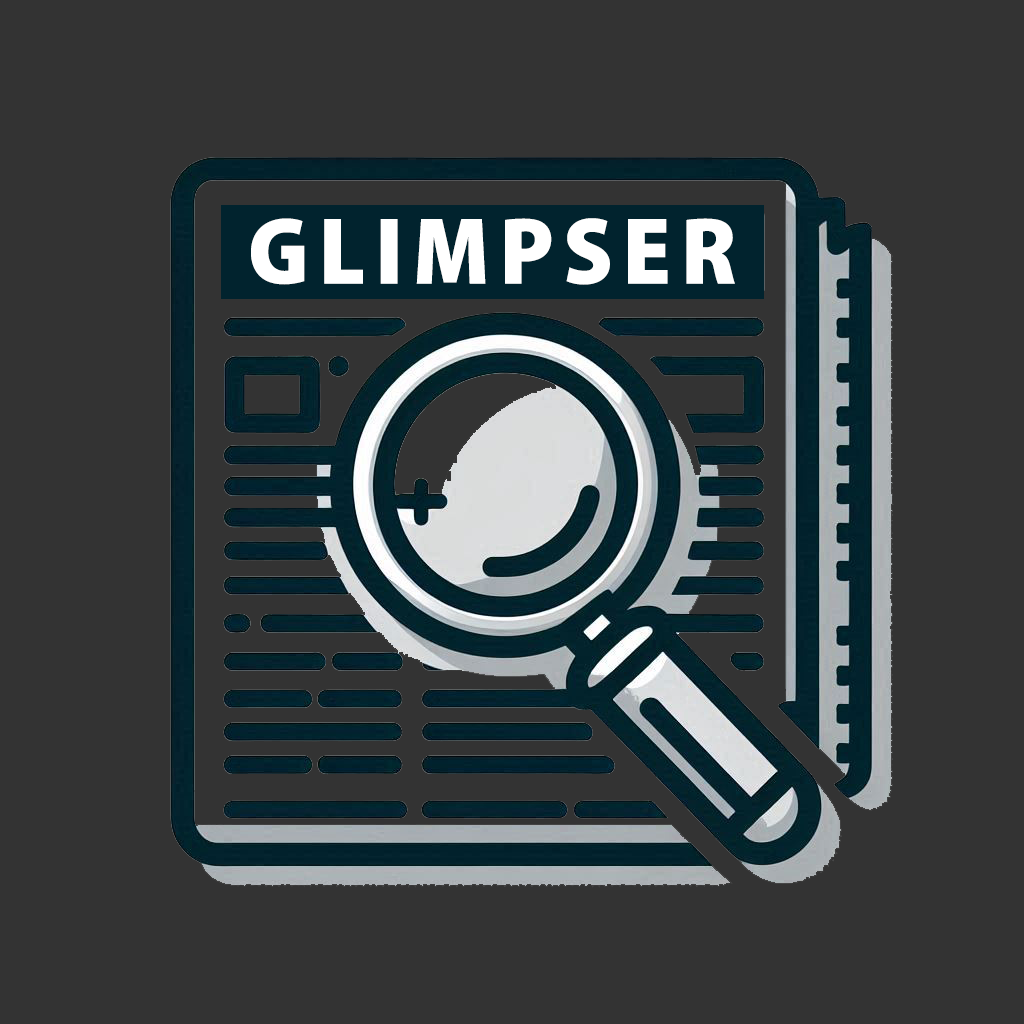
<style>
.page{position:relative;width:1024px;height:1024px;background:#333333}
.page>*{position:absolute;margin:0}
.t1{font:96px "MyriadConceptRoman-BlackSemiCondensed";letter-spacing:0.1em;color:#ffffff}
</style>
<div class="page">
<p class="t1" style="left:251px;top:218px;width:484px;height:67px">GLIMPSER</p>
</div>
